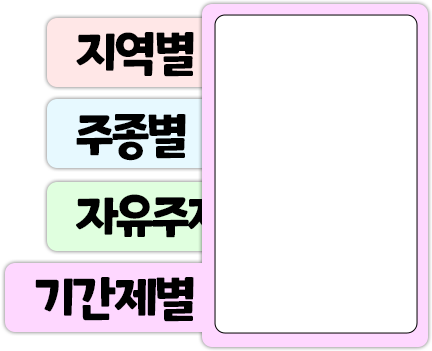
<style>
.page{position:relative;width:432px;height:351px;background:#ffffff}
.page>*{position:absolute;margin:0}
.t1{font:48.6px "ONEMobilePOPRegular";letter-spacing:-0.07em;color:#000000}
</style>
<div class="page">
<p class="t1" style="left:76px;top:32px;width:118px;height:45px">지역별</p>
<p class="t1" style="left:76px;top:114px;width:110px;height:47px">주종별</p>
<p class="t1" style="left:76px;top:194px;width:153px;height:44px">자유주제</p>
<p class="t1" style="left:35px;top:277px;width:159px;height:45px">기간제별</p>
</div>
